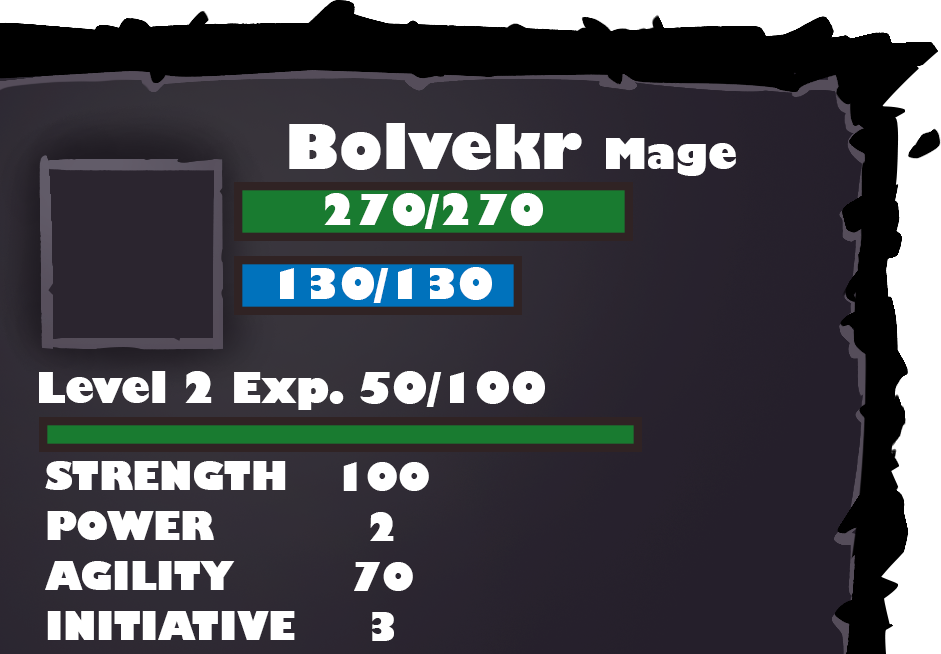
<style>
.page{position:relative;width:941px;height:654px}
.page>*{position:absolute;margin:0}
.t1{font:61.5px "GillSans-UltraBold";color:#ffffff}
.t2{font:41.7px "GillSans-UltraBold";color:#ffffff}
.t3{font:37.5px/50px "GillSans-UltraBold";color:#ffffff}
</style>
<div class="page">
<p class="t1" style="left:289px;top:123px;width:447px;height:53px">Bolvekr <span class="t2">Mage</span></p>
<p class="t2" style="left:324px;top:193px;width:219px;height:36px">270/270</p>
<p class="t2" style="left:280px;top:267px;width:212px;height:36px">130/130</p>
<p class="t2" style="left:39px;top:371px;width:506px;height:39px">Level 2 Exp. 50/100</p>
<p class="t3" style="left:45px;top:461px;width:250px;height:179px">STRENGTH<br>POWER<br>AGILITY<br>INITIATIVE</p>
<p class="t3" style="left:343px;top:462px;width:86px;height:179px;text-align:center">100<br>2<br>70<br>3</p>
</div>
